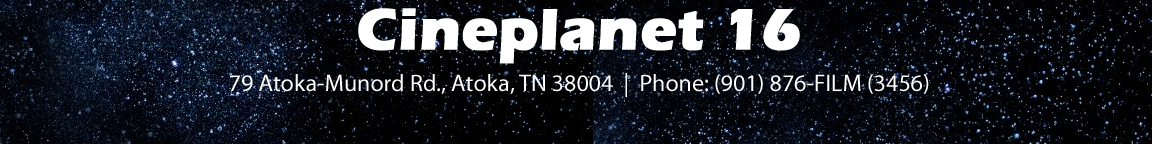
<style>
.page{position:relative;width:1152px;height:144px}
.page>*{position:absolute;margin:0}
.t1{font:24px "MyriadPro-Regular";color:#ffffff}
.t2{font:60px "ErasITC-Bold";color:#ffffff;font-weight:bold}
</style>
<div class="page">
<p class="t1" style="left:230px;top:8px;width:699px;height:89px;text-align:center"><span class="t2">Cineplanet 16<br><br></span>79 Atoka-Munord Rd., Atoka, TN 38004  |  Phone: (901) 876-FILM (3456)</p>
</div>
